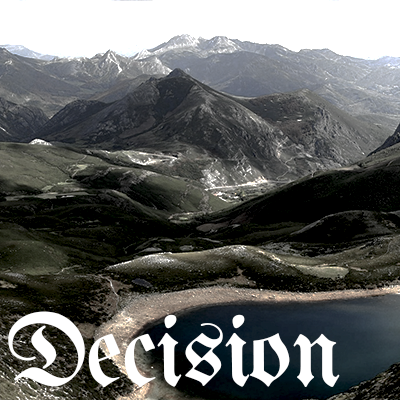
<style>
.page{position:relative;width:400px;height:400px}
.page>*{position:absolute;margin:0}
.t1{font:101px "UnifrakturMaguntia";letter-spacing:-0.01em;color:#ffffff}
</style>
<div class="page">
<p class="t1" style="left:8px;top:311px;width:332px;height:77px">Decision</p>
</div>
